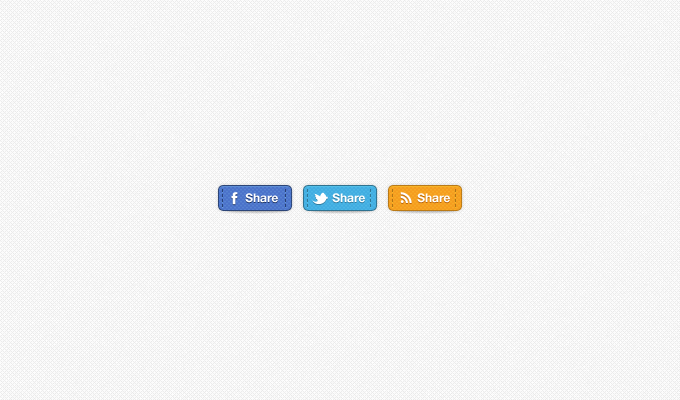
<style>
.page{position:relative;width:680px;height:400px;background:#fbfbfb}
.page>*{position:absolute;margin:0}
.t1{font:12px "HelveticaNeue-Bold";color:#ffffff}
</style>
<div class="page">
<p class="t1" style="left:245px;top:193px;width:33px;height:10px">Share</p>
<p class="t1" style="left:332px;top:193px;width:33px;height:10px">Share</p>
<p class="t1" style="left:417px;top:193px;width:33px;height:10px">Share</p>
</div>
